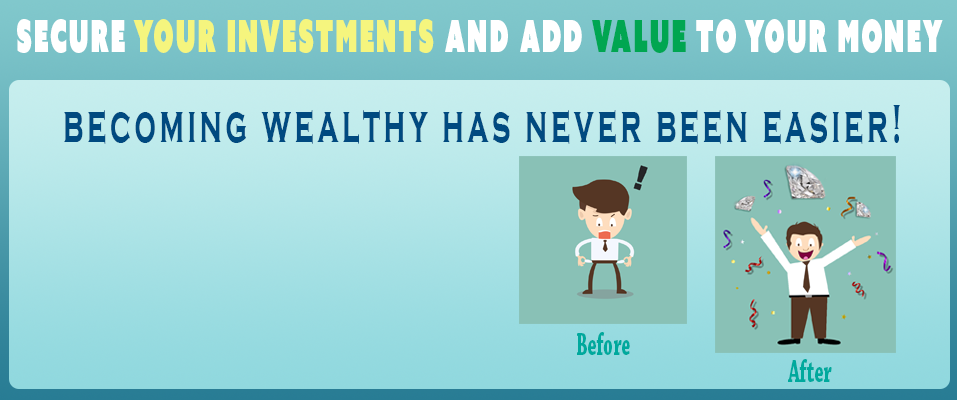
<style>
.page{position:relative;width:957px;height:400px}
.page>*{position:absolute;margin:0}
.t1{font:44.4px "AzoSansUber-Regular";letter-spacing:0.08em;color:#f5f57e;scale:0.54 1}
.t2{font:44.4px "AzoSansUber-Regular";letter-spacing:0.08em;color:#ffffff;scale:0.54 1}
.t3{font:44.4px "AzoSansUber-Regular";letter-spacing:0.08em;color:#00a651;scale:0.54 1}
.t4{font:55.5px "CopperplateGothic-Bold";letter-spacing:0.12em;color:#004a80;scale:0.54 1}
.t5{font:33.3px "ChaparralPro-Bold";color:#00a99d;scale:0.54 1}
</style>
<div class="page">
<p class="t1" style="left:17px;top:19px;width:926px;height:34px"><span class="t2">Secure </span>your investments <span class="t2">and add </span><span class="t3">value</span><span class="t2"> to your money</span></p>
<p class="t4" style="left:64px;top:105px;width:836px;height:39px">becoming wealthy has never been easier!</p>
<p class="t5" style="left:577px;top:332px;width:53px;height:23px">Before</p>
<p class="t5" style="left:788px;top:359px;width:44px;height:23px">After</p>
</div>
